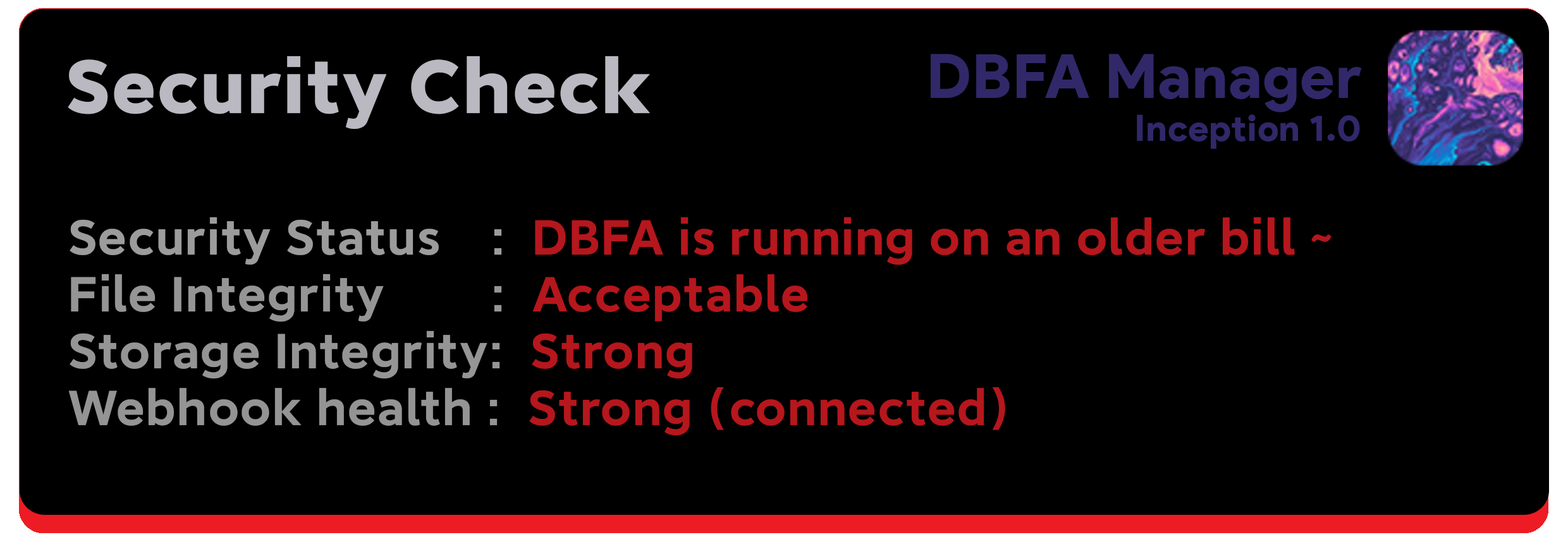
<style>
.page{position:relative;width:1568px;height:542px;background:#000000}
.page>*{position:absolute;margin:0}
.t1{font:61.4px "ProductSans-Black";letter-spacing:0.01em;color:#312869}
.t2{font:72px "MILanProVF-Heavy";letter-spacing:0.01em;color:#bab8c0}
.t3{font:36.5px "ProductSans-Black";letter-spacing:0.01em;color:#312869}
.t4{font:47.4px/28.5px "MILanProVF-SemiBold";letter-spacing:0.01em;color:#b5171d}
.t5{font:47.4px/28.5px "MILanProVF-SemiBold";letter-spacing:0.01em;color:#9c9c9d}
.t6{font:47.4px/28.5px "MILanProVF-SemiBold";letter-spacing:0.01em;color:#959596}
.t7{font:47.4px/28.5px "MILanProVF-SemiBold";letter-spacing:0.01em;color:#949495}
</style>
<div class="page">
<p class="t1" style="left:931px;top:54px;width:431px;height:59px">DBFA Manager</p>
<p class="t2" style="left:68px;top:56px;width:582px;height:74px">Security Check</p>
<p class="t3" style="left:1137px;top:114px;width:223px;height:35px">Inception 1.0</p>
<p class="t4" style="left:68px;top:217px;width:1264px;height:219px"><span class="t5">Security Status    :  </span>DBFA is running on an older bill ~<br><br><span class="t6">File Integrity      :  </span>Acceptable<br><br><span class="t6">Storage Integrity:  </span>Strong<br><br><span class="t7">Webhook health :  </span>Strong (connected)</p>
</div>
